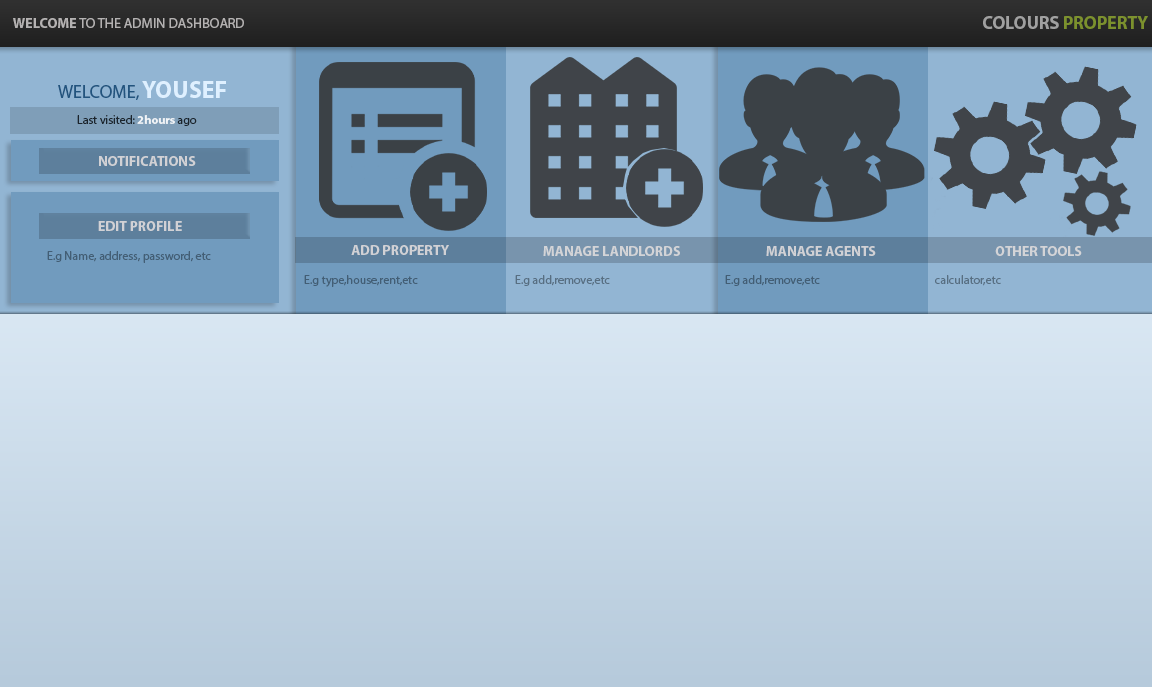
<style>
.page{position:relative;width:1152px;height:687px}
.page>*{position:absolute;margin:0}
.t1{font:18px "MyriadPro-Bold"}
.t2{font:14px "MyriadPro-Regular";color:#b5b2b2}
.t3{font:14px "MyriadPro-Bold";color:#b5b2b2}
.t4{font:12px "MyriadPro-Regular";color:#1b242c}
.t5{font:12px "MyriadPro-Bold";color:#1b242c}
.t6{font:14px "MyriadPro-Bold";color:#e0dddd}
.t7{font:12px "MyriadPro-Regular";color:#435e75}
.t8{font:12px "MyriadPro-Regular";color:#586f82}
</style>
<div class="page">
<p class="t1" style="left:983px;top:16px;width:165px;height:13px">COLOURS PROPERTY</p>
<p class="t2" style="left:13px;top:18px;width:231px;height:10px"><span class="t3">WELCOME</span> TO THE ADMIN DASHBOARD</p>
<p class="t4" style="left:77px;top:115px;width:120px;height:11px">Last visited: <span class="t5">2hours</span> ago</p>
<p class="t6" style="left:99px;top:156px;width:97px;height:10px;opacity:0.86">NOTIFICATIONS</p>
<p class="t6" style="left:98px;top:221px;width:84px;height:10px;opacity:0.86">EDIT PROFILE</p>
<p class="t6" style="left:351px;top:245px;width:98px;height:10px;opacity:0.86">ADD PROPERTY</p>
<p class="t6" style="left:543px;top:246px;width:137px;height:10px;opacity:0.86">MANAGE LANDLORDS</p>
<p class="t6" style="left:766px;top:246px;width:110px;height:10px;opacity:0.86">MANAGE AGENTS</p>
<p class="t6" style="left:995px;top:246px;width:87px;height:10px;opacity:0.86">OTHER TOOLS</p>
<p class="t7" style="left:47px;top:251px;width:164px;height:12px">E.g Name, address, password, etc</p>
<p class="t7" style="left:304px;top:275px;width:114px;height:12px">E.g type,house,rent,etc</p>
<p class="t8" style="left:515px;top:275px;width:95px;height:11px">E.g add,remove,etc</p>
<p class="t7" style="left:725px;top:275px;width:95px;height:11px">E.g add,remove,etc</p>
<p class="t8" style="left:935px;top:275px;width:66px;height:11px">calculator,etc</p>
</div>
